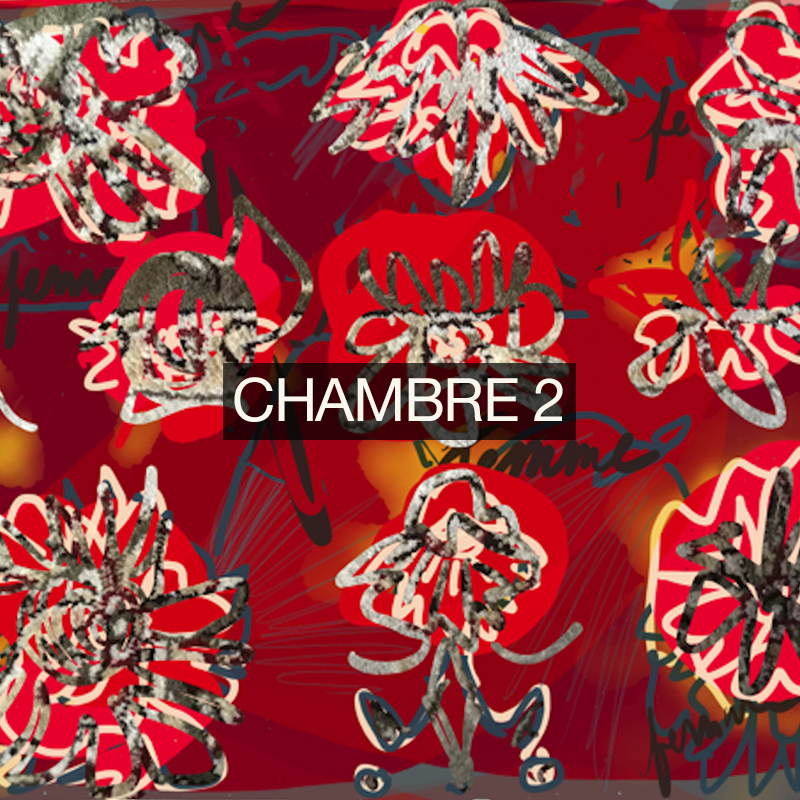
<style>
.page{position:relative;width:800px;height:800px}
.page>*{position:absolute;margin:0}
.t1{font:60px "HelveticaNeue";letter-spacing:-0.025em;color:#faf7ee}
</style>
<div class="page">
<p class="t1" style="left:234px;top:377px;width:329px;height:45px">CHAMBRE 2</p>
</div>
